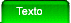
<style>
.page{position:relative;width:71px;height:23px}
.page>*{position:absolute;margin:0}
.t1{font:11px "ArialMT";color:#ffffff}
</style>
<div class="page">
<p class="t1" style="left:16px;top:7px;width:26px;height:8px">Texto</p>
</div>
